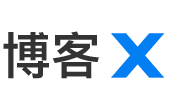
<style>
.page{position:relative;width:190px;height:110px;background:#ffffff}
.page>*{position:absolute;margin:0}
.t1{font:50px "PingFangSC-Semibold";color:#333333}
</style>
<div class="page">
<p class="t1" style="left:3px;top:31px;width:96px;height:48px">博客</p>
</div>
